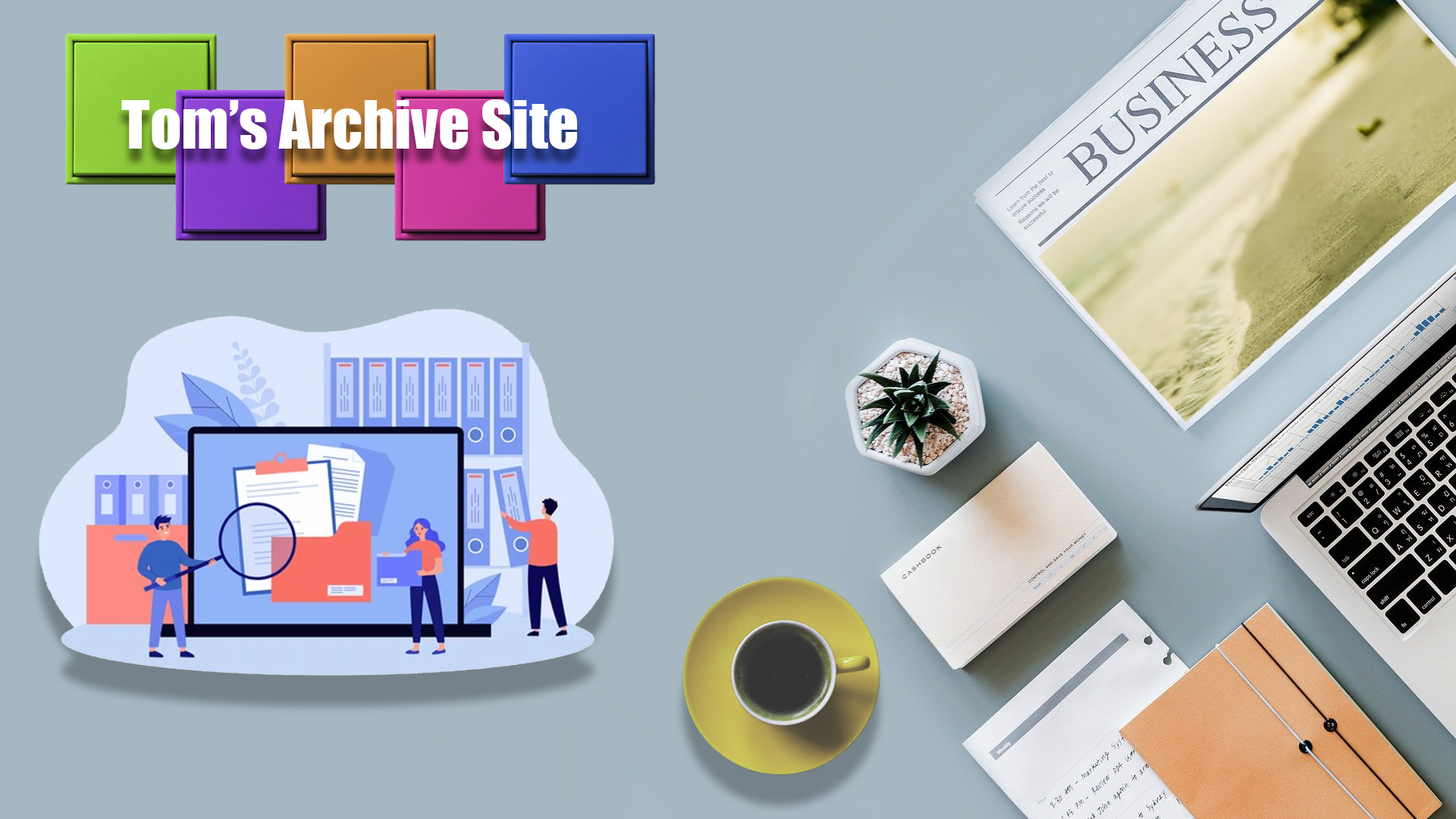
<style>
.page{position:relative;width:1456px;height:819px}
.page>*{position:absolute;margin:0}
.t1{font:61.4px "Impact";color:#ffffff}
</style>
<div class="page">
<p class="t1" style="left:121px;top:99px;width:456px;height:50px">Tom’s Archive Site</p>
</div>
